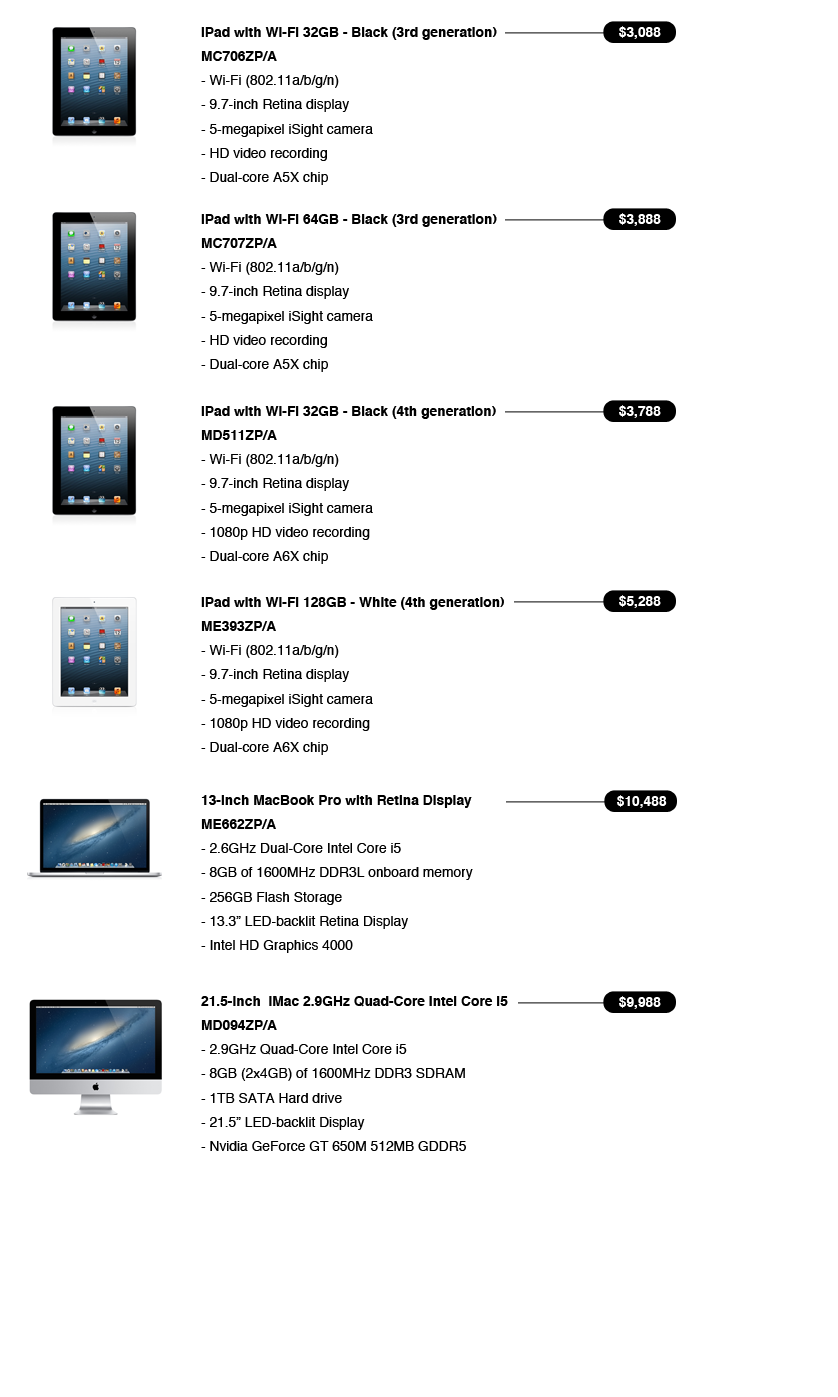
<style>
.page{position:relative;width:838px;height:1397px;background:#ffffff}
.page>*{position:absolute;margin:0}
.t1{font:13.8px "Helvetica";color:#000000}
.t2{font:13.8px "Helvetica-Bold";color:#000000}
.t3{font:13.8px "Helvetica-Bold";color:#ffffff}
</style>
<div class="page">
<p class="t1" style="left:201px;top:27px;width:296px;height:158px"><span class="t2">iPad with Wi-Fi 32GB - Black (3rd generation) <br>MC706ZP/A<br></span>- Wi-Fi (802.11a/b/g/n) <br>- 9.7-inch Retina display <br>- 5-megapixel iSight camera <br>- HD video recording <br>- Dual-core A5X chip</p>
<p class="t3" style="left:619px;top:26px;width:42px;height:13px">$3,088</p>
<p class="t1" style="left:201px;top:214px;width:296px;height:158px"><span class="t2">iPad with Wi-Fi 64GB - Black (3rd generation)<br>MC707ZP/A<br></span>- Wi-Fi (802.11a/b/g/n) <br>- 9.7-inch Retina display <br>- 5-megapixel iSight camera <br>- HD video recording <br>- Dual-core A5X chip</p>
<p class="t3" style="left:619px;top:213px;width:42px;height:13px">$3,888</p>
<p class="t1" style="left:201px;top:406px;width:295px;height:158px"><span class="t2">iPad with Wi-Fi 32GB - Black (4th generation)<br>MD511ZP/A<br></span>- Wi-Fi (802.11a/b/g/n) <br>- 9.7-inch Retina display <br>- 5-megapixel iSight camera <br>- 1080p HD video recording <br>- Dual-core A6X chip</p>
<p class="t3" style="left:619px;top:405px;width:42px;height:13px">$3,788</p>
<p class="t1" style="left:201px;top:597px;width:303px;height:158px"><span class="t2">iPad with Wi-Fi 128GB - White (4th generation)<br>ME393ZP/A<br></span>- Wi-Fi (802.11a/b/g/n) <br>- 9.7-inch Retina display <br>- 5-megapixel iSight camera <br>- 1080p HD video recording <br>- Dual-core A6X chip</p>
<p class="t3" style="left:619px;top:595px;width:42px;height:13px">$5,288</p>
<p class="t1" style="left:201px;top:795px;width:272px;height:158px"><span class="t2">13-inch MacBook Pro with Retina Display<br>ME662ZP/A<br></span>- 2.6GHz Dual-Core Intel Core i5<br>- 8GB of 1600MHz DDR3L onboard memory<br>- 256GB Flash Storage<br>- 13.3” LED-backlit Retina Display<br>- Intel HD Graphics 4000</p>
<p class="t3" style="left:617px;top:795px;width:50px;height:13px">$10,488</p>
<p class="t1" style="left:201px;top:996px;width:307px;height:155px"><span class="t2">21.5-inch  iMac 2.9GHz Quad-Core Intel Core i5<br>MD094ZP/A<br></span>- 2.9GHz Quad-Core Intel Core i5<br>- 8GB (2x4GB) of 1600MHz DDR3 SDRAM<br>- 1TB SATA Hard drive<br>- 21.5” LED-backlit Display<br>- Nvidia GeForce GT 650M 512MB GDDR5</p>
<p class="t3" style="left:619px;top:996px;width:42px;height:13px">$9,988</p>
</div>
